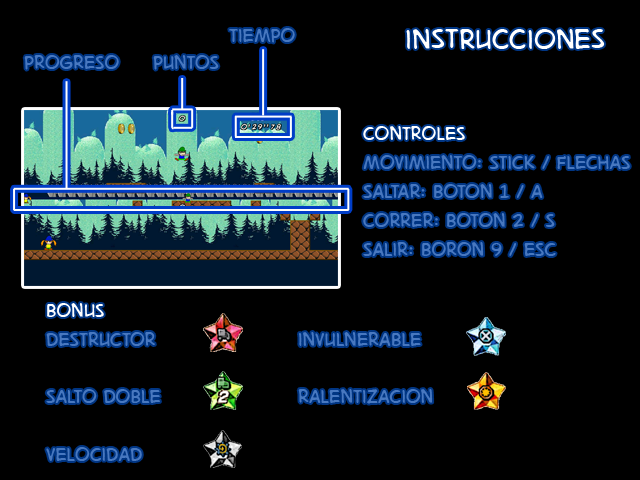
<style>
.page{position:relative;width:640px;height:480px;background:#000000}
.page>*{position:absolute;margin:0}
.t1{font:24px "DigitalStrip.BB";color:#4878c0}
.t2{font:36px "DigitalStrip.BB";color:#ffffff}
.t3{font:24px/29px "DigitalStrip.BB";color:#4878c0}
.t4{font:24px "DigitalStrip.BB";color:#ffffff}
</style>
<div class="page">
<p class="t1" style="left:229px;top:28px;width:66px;height:15px">tiempo</p>
<p class="t2" style="left:406px;top:29px;width:199px;height:20px">instrucciones</p>
<p class="t1" style="left:24px;top:55px;width:95px;height:15px">progreso</p>
<p class="t1" style="left:153px;top:55px;width:66px;height:15px">puntos</p>
<p class="t3" style="left:363px;top:126px;width:267px;height:130px"><span class="t4">controles<br></span>movimiento: stick / flechas<br>saltar: boton 1 / a<br>correr: boton 2 / s<br>salir: boron 9 / esc</p>
<p class="t1" style="left:46px;top:303px;width:387px;height:158px"><span class="t4">bonus<br></span>destructor    invulnerable<br><br>salto doble    ralentizacion<br><br>velocidad</p>
</div>
